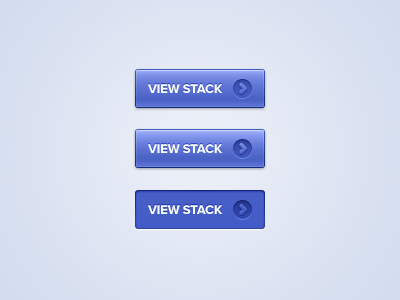
<style>
.page{position:relative;width:400px;height:300px}
.page>*{position:absolute;margin:0}
.t1{font:13px "ProximaNova-Bold";letter-spacing:-0.01em;color:#f5fcfe}
</style>
<div class="page">
<p class="t1" style="left:148px;top:84px;width:75px;height:9px">VIEW STACK</p>
<p class="t1" style="left:148px;top:144px;width:75px;height:9px">VIEW STACK</p>
<p class="t1" style="left:148px;top:205px;width:75px;height:9px">VIEW STACK</p>
</div>
